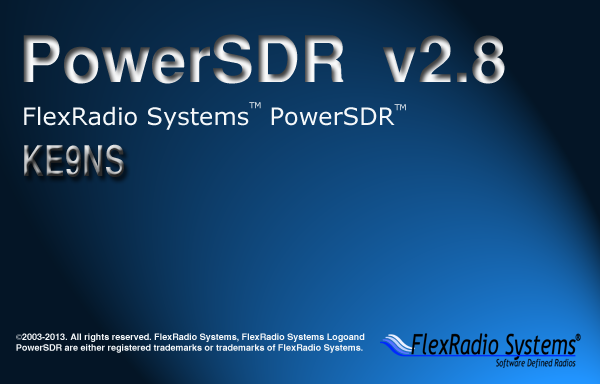
<style>
.page{position:relative;width:600px;height:384px}
.page>*{position:absolute;margin:0}
.t1{font:64px "SansSerifBold"}
.t2{font:24px "MSReferenceSansSerif";color:#f5f8fa}
.t3{font:14px "MSReferenceSansSerif";color:#f5f8fa}
.t4{font:42px "SansSerifBold";letter-spacing:0.025em;scale:0.71 1}
.t5{font:9px "SansSerifBold";color:#f5f8fa}
.t6{font:9px "MyriadPro-Regular";color:#f5f8fa}
</style>
<div class="page">
<p class="t1" style="left:23px;top:34px;width:482px;height:50px">PowerSDR  v2.8</p>
<p class="t2" style="left:24px;top:102px;width:382px;height:28px">FlexRadio Systems<span class="t3">TM</span> PowerSDR<span class="t3">TM</span></p>
<p class="t4" style="left:24px;top:144px;width:100px;height:33px">KE9NS</p>
<p class="t5" style="left:16px;top:333px;width:349px;height:20px"><span class="t6">©</span>2003-2013. All rights reserved. FlexRadio Systems, FlexRadio Systems Logoand<br>PowerSDR are either registered trademarks or trademarks of FlexRadio Systems.</p>
</div>
